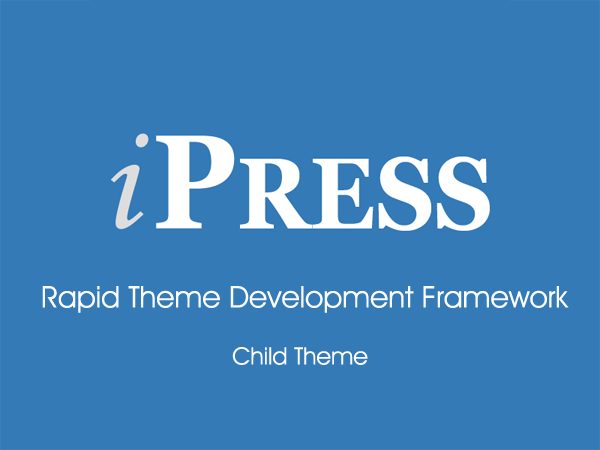
<style>
.page{position:relative;width:600px;height:450px;background:#337ab7}
.page>*{position:absolute;margin:0}
.t1{font:30px "Decker-Regular";color:#fcfcfc}
.t2{font:24px "Decker-Regular";color:#fcfcfc}
</style>
<div class="page">
<p class="t1" style="left:42px;top:286px;width:527px;height:27px">Rapid Theme Development Framework</p>
<p class="t2" style="left:232px;top:347px;width:136px;height:18px">Child Theme</p>
</div>
